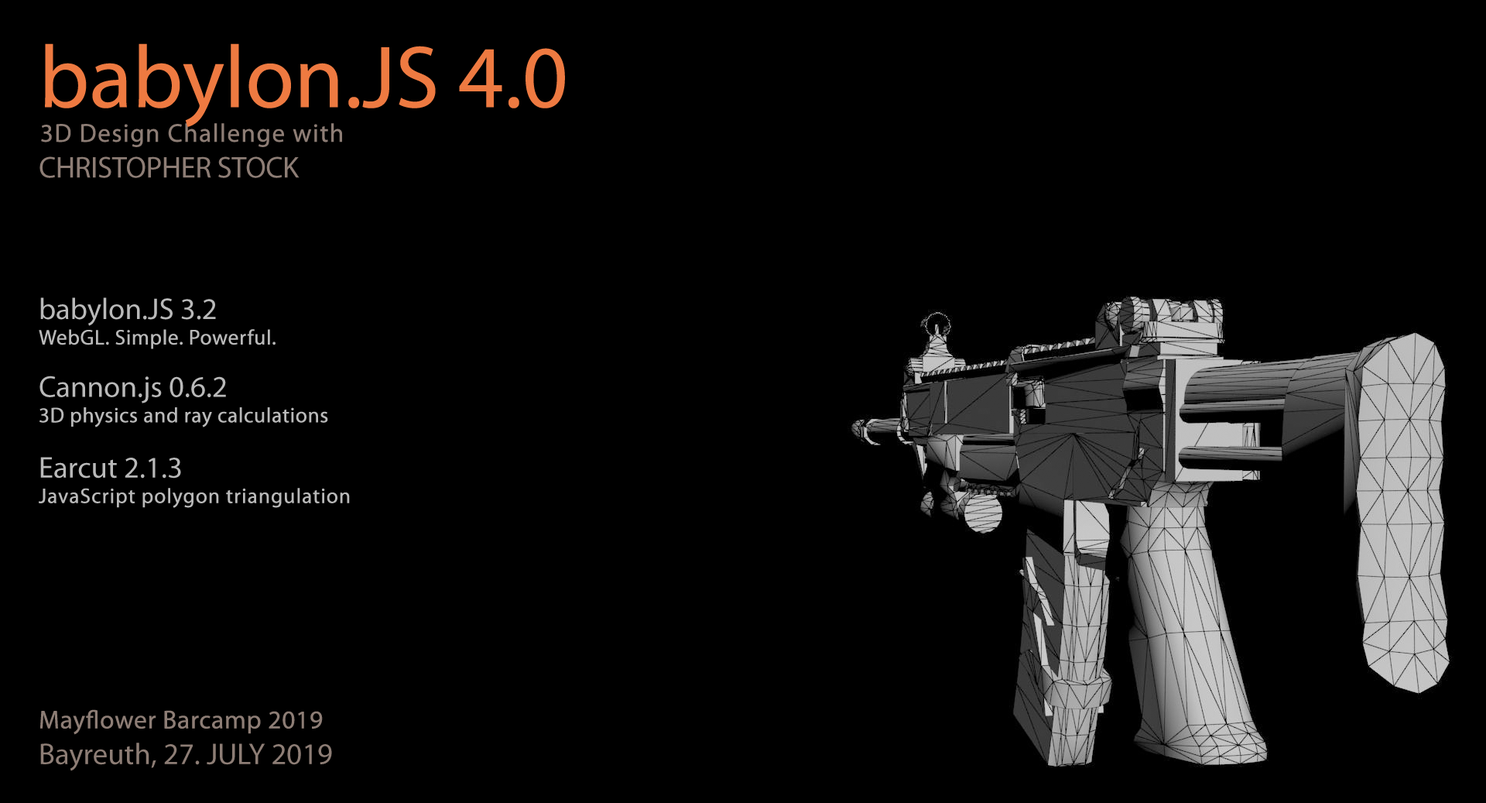
<style>
.page{position:relative;width:1486px;height:803px;background:#000000}
.page>*{position:absolute;margin:0}
.t1{font:88.7px "MyriadPro-Regular";color:#ee7a41}
.t2{font:25.7px/35.7px "MyriadPro-Regular";letter-spacing:0.022em;color:#8d7d75;font-weight:bold}
.t3{font:30px/35.7px "MyriadPro-Regular";letter-spacing:-0.007em;color:#8d7d75}
.t4{font:21.1px/25.5px "MyriadPro-Regular";letter-spacing:0.012em;color:#b9b9b9;font-weight:bold}
.t5{font:30px/52.3px "MyriadPro-Regular";color:#b9b9b9}
.t6{font:21.1px/25.5px "MyriadPro-Regular";color:#b9b9b9;font-weight:bold}
.t7{font:30px/55.2px "MyriadPro-Regular";color:#b9b9b9}
.t8{font:30px/35.7px "MyriadPro-Regular";color:#8d7d75}
.t9{font:25.7px/35.7px "MyriadPro-Regular";color:#8d7d75;font-weight:bold}
</style>
<div class="page">
<p class="t1" style="left:45px;top:43px;width:520px;height:84px">babylon.JS 4.0</p>
<p class="t2" style="left:39px;top:123px;width:303px;height:55px">3D Design Challenge with<br><span class="t3">CHRISTOPHER STOCK</span></p>
<p class="t4" style="left:39px;top:297px;width:311px;height:211px"><span class="t5">babylon.JS 3.2<br></span><span class="t6">WebGL. Simple. Powerful.<br></span><span class="t5">Cannon.js 0.6.2<br></span><span class="t6">3D physics and ray calculations<br></span><span class="t7">Earcut 2.1.3<br></span>JavaScript polygon triangulation</p>
<p class="t8" style="left:40px;top:709px;width:292px;height:62px"><span class="t9">Mayflower Barcamp 2019<br></span>Bayreuth, 27. JULY 2019</p>
</div>
